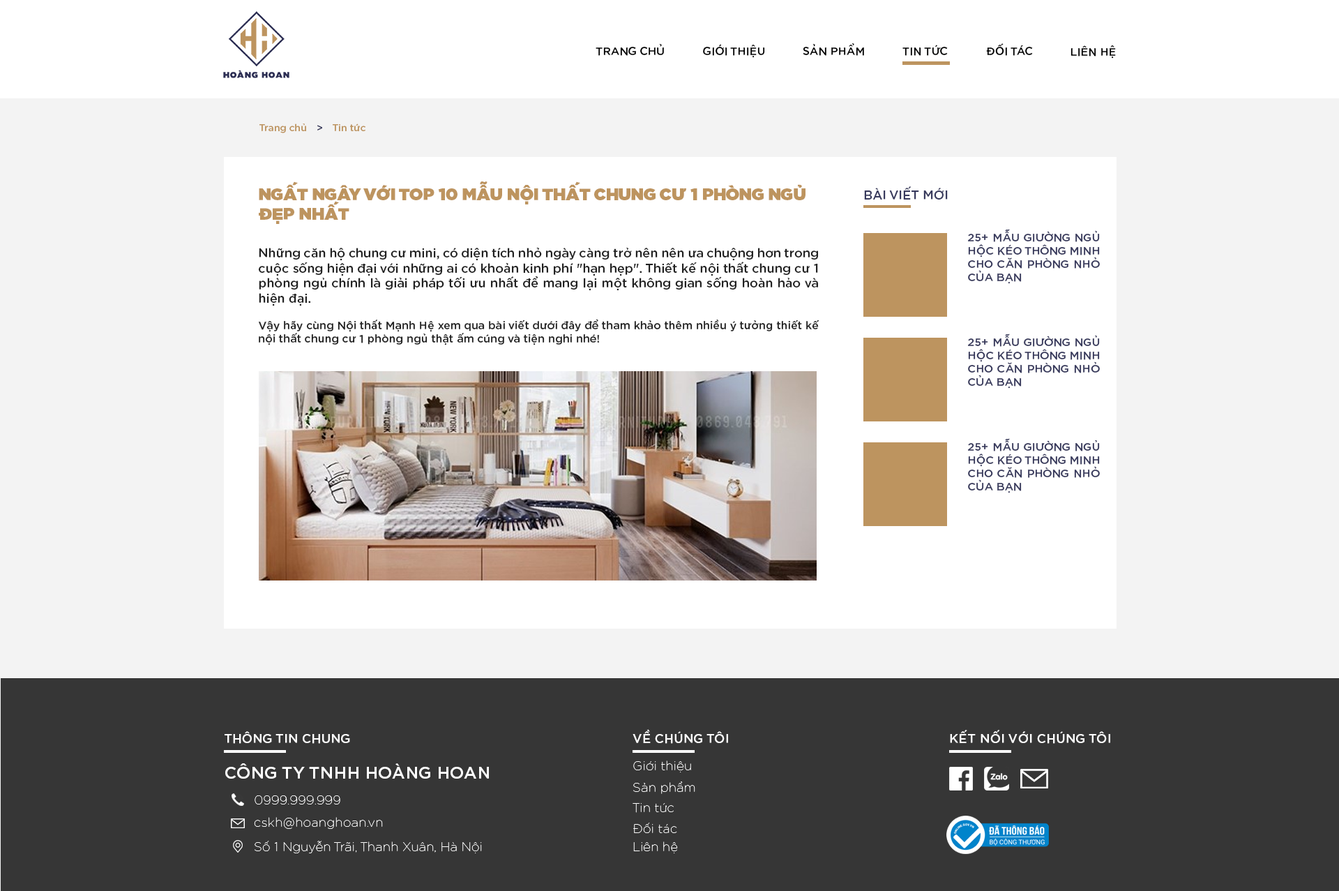
<style>
.page{position:relative;width:1339px;height:891px;background:#f3f3f3}
.page>*{position:absolute;margin:0}
.t1{font:11.2px "iCielGotham-Medium";color:#000000;text-transform:uppercase}
.t2{font:9.8px "iCielGotham-Medium";color:#bd945f}
.t3{font:9.8px "iCielGotham-Medium";color:#2c2e53}
.t4{font:16.7px "iCielGotham-Ultra";color:#bd945f}
.t5{font:12.6px "iCielGotham-Medium";color:#383a5d}
.t6{font:11.2px "iCielGotham-Medium";color:#383a5d}
.t7{font:12.6px "iCielGotham-Medium";color:#222222}
.t8{font:11.2px "iCielGotham-Medium";color:#222222}
.t9{font:12.6px "iCielGotham-Medium";letter-spacing:0.025em;color:#ffffff}
.t10{font:12.6px "iCielGotham-Thin";letter-spacing:0.025em;color:#ffffff}
.t11{font:16.7px "iCielGotham-Medium";letter-spacing:0.025em;color:#ffffff}
</style>
<div class="page">
<p class="t1" style="left:596px;top:44px;width:68px;height:12px">trang chủ</p>
<p class="t1" style="left:703px;top:44px;width:62px;height:14px">gIớI thIệu</p>
<p class="t1" style="left:803px;top:43px;width:61px;height:13px">sản phẩm</p>
<p class="t1" style="left:902px;top:45px;width:46px;height:11px">tIn tức</p>
<p class="t1" style="left:986px;top:43px;width:47px;height:13px">đốI tác</p>
<p class="t1" style="left:1070px;top:45px;width:46px;height:14px">lIên hệ</p>
<p class="t2" style="left:259px;top:123px;width:47px;height:10px">Trang chủ</p>
<p class="t3" style="left:317px;top:125px;width:5px;height:5px">&gt;</p>
<p class="t2" style="left:333px;top:123px;width:32px;height:8px">Tin tức</p>
<p class="t4" style="left:259px;top:181px;width:546px;height:43px;text-align:justify">NGẤT NGÂY VỚI TOP 10 MẪU NỘI THẤT CHUNG CƯ 1 PHÒNG NGỦ <br>ĐẸP NHẤT</p>
<p class="t5" style="left:864px;top:186px;width:84px;height:13px">BÀI VIẾT MỚI</p>
<p class="t6" style="left:968px;top:229px;width:132px;height:55px;text-align:justify">25+ MẪU GIƯỜNG NGỦ HỘC KÉO THÔNG MINH CHO CĂN PHÒNG NHỎ CỦA BẠN</p>
<p class="t7" style="left:258px;top:248px;width:561px;height:97px;text-align:justify">Những căn hộ chung cư mini, có diện tích nhỏ ngày càng trở nên nên ưa chuộng hơn trong cuộc sống hiện đại với những ai có khoản kinh phí "hạn hẹp". Thiết kế nội thất chung cư 1 phòng ngủ chính là giải pháp tối ưu nhất để mang lại một không gian sống hoàn hảo và hiện đại.<br><span class="t8"><br>Vậy hãy cùng Nội thất Mạnh Hệ xem qua bài viết dưới đây để tham khảo thêm nhiều ý tưởng thiết kế nội thất chung cư 1 phòng ngủ thật ấm cúng và tiện nghi nhé!</span></p>
<p class="t6" style="left:968px;top:333px;width:132px;height:55px;text-align:justify">25+ MẪU GIƯỜNG NGỦ HỘC KÉO THÔNG MINH CHO CĂN PHÒNG NHỎ CỦA BẠN</p>
<p class="t6" style="left:968px;top:438px;width:132px;height:55px;text-align:justify">25+ MẪU GIƯỜNG NGỦ HỘC KÉO THÔNG MINH CHO CĂN PHÒNG NHỎ CỦA BẠN</p>
<p class="t9" style="left:225px;top:731px;width:125px;height:12px">THÔNG TIN CHUNG</p>
<p class="t9" style="left:633px;top:729px;width:95px;height:14px">VỀ CHÚNG TÔI</p>
<p class="t9" style="left:950px;top:729px;width:160px;height:14px">KẾT NỐI VỚI CHÚNG TÔI</p>
<p class="t10" style="left:633px;top:760px;width:58px;height:12px">Giới thiệu</p>
<p class="t11" style="left:225px;top:763px;width:264px;height:15px">CÔNG TY TNHH HOÀNG HOAN</p>
<p class="t10" style="left:633px;top:781px;width:62px;height:13px">Sản phẩm</p>
<p class="t10" style="left:255px;top:795px;width:85px;height:9px">0999.999.999</p>
<p class="t10" style="left:633px;top:803px;width:41px;height:9px">Tin tức</p>
<p class="t10" style="left:254px;top:817px;width:129px;height:11px">cskh@hoanghoan.vn</p>
<p class="t10" style="left:633px;top:822px;width:44px;height:11px">Đối tác</p>
<p class="t10" style="left:255px;top:840px;width:227px;height:13px">Số 1 Nguyễn Trãi, Thanh Xuân, Hà Nội</p>
<p class="t10" style="left:633px;top:841px;width:45px;height:12px">Liên hệ</p>
</div>
